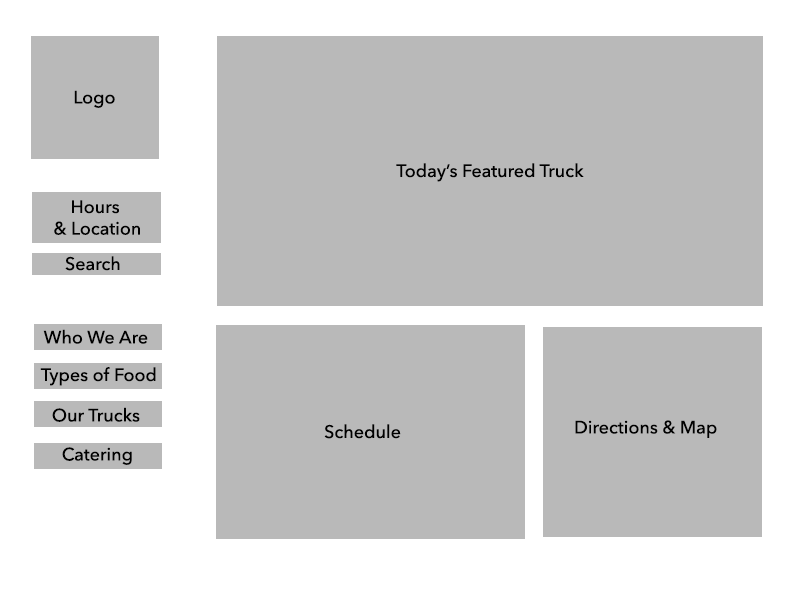
<style>
.page{position:relative;width:800px;height:600px;background:#b9b9b9}
.page>*{position:absolute;margin:0}
.t1{font:18px "AvenirNext-Medium";color:#000000}
</style>
<div class="page">
<p class="t1" style="left:74px;top:90px;width:41px;height:18px">Logo</p>
<p class="t1" style="left:396px;top:163px;width:188px;height:19px">Today’s Featured Truck</p>
<p class="t1" style="left:54px;top:200px;width:86px;height:35px;text-align:center">Hours <br>&amp; Location</p>
<p class="t1" style="left:65px;top:256px;width:55px;height:15px">Search</p>
<p class="t1" style="left:43px;top:329px;width:105px;height:15px">Who We Are</p>
<p class="t1" style="left:40px;top:367px;width:116px;height:19px">Types of Food</p>
<p class="t1" style="left:52px;top:407px;width:88px;height:15px">Our Trucks</p>
<p class="t1" style="left:324px;top:424px;width:77px;height:15px">Schedule</p>
<p class="t1" style="left:575px;top:420px;width:142px;height:18px">Directions &amp; Map</p>
<p class="t1" style="left:62px;top:447px;width:70px;height:18px">Catering</p>
</div>
